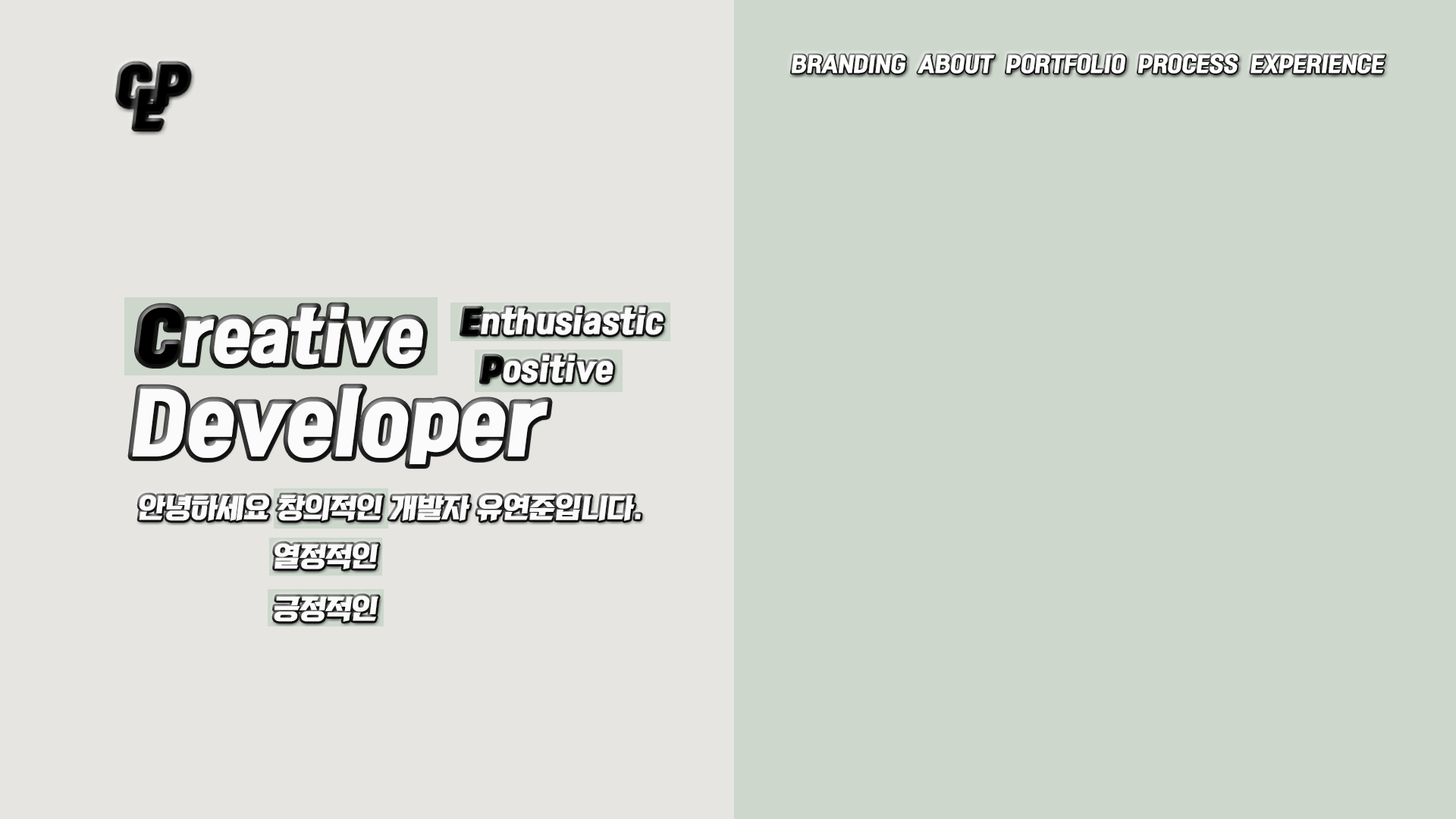
<style>
.page{position:relative;width:1456px;height:819px;background:#cdd7cc}
.page>*{position:absolute;margin:0}
.t1{font:21.1px "KoreanRKT-R";color:#ffffff}
.t2{font:63.5px "KoreanRKT-R";color:#fbfbfb}
.t3{font:63.5px "KoreanRKT-R";color:#000000}
.t4{font:30.3px "KoreanRKT-R";color:#fbfbfb}
.t5{font:30.3px "KoreanRKT-R";color:#000000}
.t6{font:79.6px "KoreanRKT-R";color:#fbfbfb}
.t7{font:26.5px "KoreanRKT-R";color:#fbfbfb}
</style>
<div class="page">
<p class="t1" style="left:792px;top:54px;width:593px;height:20px">BRANDING  ABOUT  PORTFOLIO  PROCESS  EXPERIENCE</p>
<p class="t2" style="left:139px;top:306px;width:284px;height:59px"><span class="t3">C</span>reative</p>
<p class="t4" style="left:461px;top:307px;width:203px;height:28px"><span class="t5">E</span>nthusiastic</p>
<p class="t4" style="left:481px;top:355px;width:132px;height:28px"><span class="t5">P</span>ositive</p>
<p class="t6" style="left:132px;top:388px;width:416px;height:77px">Developer</p>
<p class="t7" style="left:139px;top:494px;width:502px;height:27px">안녕하세요 창의적인 개발자 유연준입니다.</p>
<p class="t7" style="left:275px;top:543px;width:103px;height:27px">열정적인</p>
<p class="t7" style="left:274px;top:595px;width:104px;height:27px">긍정적인</p>
</div>
